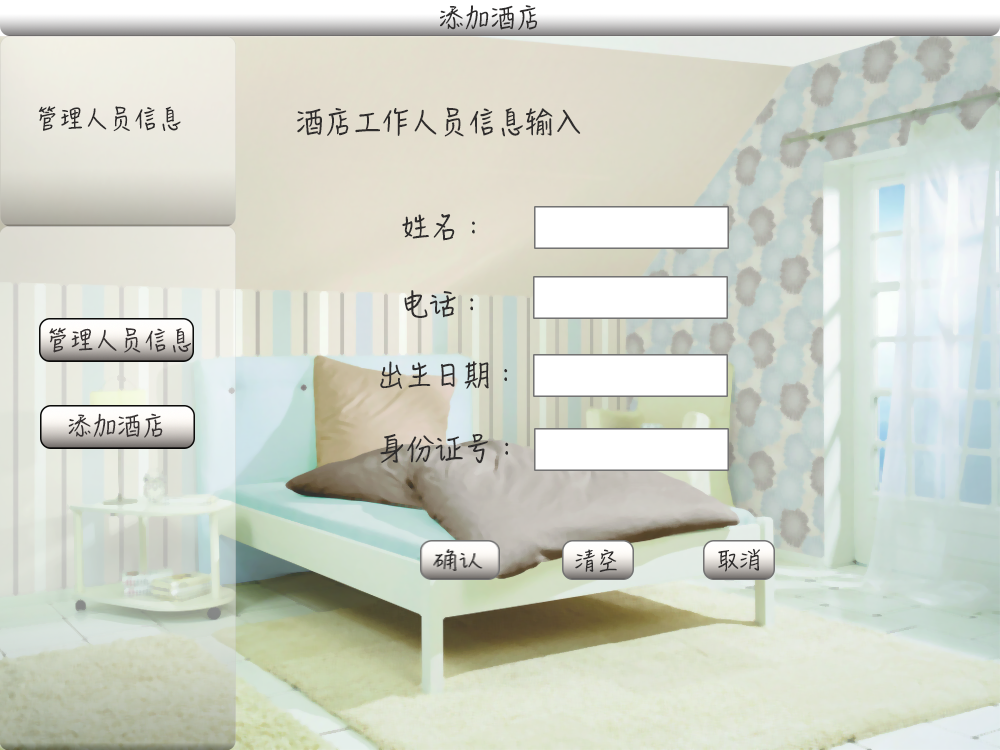
<style>
.page{position:relative;width:1000px;height:750px}
.page>*{position:absolute;margin:0}
.t1{font:25px "HanziPenSC-W5";letter-spacing:-0.005em;color:#2f2d2d;text-transform:uppercase}
.t2{font:24px "HanziPenSC-W5";letter-spacing:-0.005em;color:#2d2b2b;text-transform:uppercase}
.t3{font:28px "HanziPenSC-W5";letter-spacing:-0.005em;color:#2f2d2d;text-transform:uppercase}
</style>
<div class="page">
<p class="t1" style="left:440px;top:5px;width:98px;height:25px">添加酒店</p>
<p class="t2" style="left:38px;top:106px;width:143px;height:26px">管理人员信息</p>
<p class="t3" style="left:297px;top:107px;width:284px;height:30px">酒店工作人员信息输入</p>
<p class="t3" style="left:402px;top:214px;width:73px;height:27px">姓名：</p>
<p class="t3" style="left:404px;top:290px;width:70px;height:28px">电话：</p>
<p class="t3" style="left:380px;top:361px;width:128px;height:28px">出生日期：</p>
<p class="t3" style="left:380px;top:434px;width:129px;height:30px">身份证号：</p>
</div>
